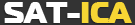
<style>
.page{position:relative;width:135px;height:25px;background:#333333}
.page>*{position:absolute;margin:0}
.t1{font:28.6px "MagistralBlack";color:#ffffff}
.t2{font:28.6px "MagistralBlack";color:#f7d634}
</style>
<div class="page">
<p class="t1" style="left:4px;top:2px;width:128px;height:21px">SAT-<span class="t2">ICA</span></p>
</div>
